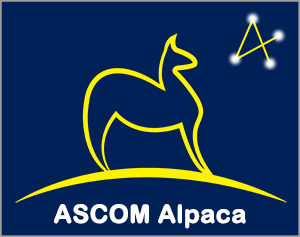
<style>
.page{position:relative;width:300px;height:237px;background:#002157}
.page>*{position:absolute;margin:0}
.t1{font:25px "ArialRoundedMTBold";color:#ffffff;font-weight:bold}
</style>
<div class="page">
<p class="t1" style="left:54px;top:204px;width:192px;height:25px">ASCOM Alpaca</p>
</div>
